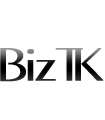
<style>
.page{position:relative;width:105px;height:120px;background:#ffffff}
.page>*{position:absolute;margin:0}
.t1{font:46.7px "COM4tFineRegular";letter-spacing:-0.1em;font-weight:bold;scale:1.25 1}
</style>
<div class="page">
<p class="t1" style="left:0px;top:48px;width:104px;height:34px">BizTK</p>
</div>
